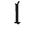
<style>
.page{position:relative;width:32px;height:32px;background:#ffffff}
.page>*{position:absolute;margin:0}
.t1{font:23px "English-Gothic,-17th-c.-Regular";letter-spacing:0.1em;color:#181515;font-weight:bold}
</style>
<div class="page">
<p class="t1" style="left:14px;top:1px;width:7px;height:24px">l</p>
</div>
